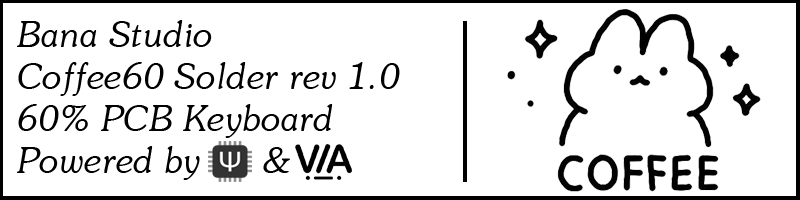
<style>
.page{position:relative;width:800px;height:200px;background:#ffffff}
.page>*{position:absolute;margin:0}
.t1{font:35px "UVNSaigonItalic";color:#000000}
</style>
<div class="page">
<p class="t1" style="left:17px;top:20px;width:383px;height:160px">Bana Studio<br>Coffee60 Solder rev 1.0<br>60% PCB Keyboard<br>Powered by      &amp;</p>
</div>
